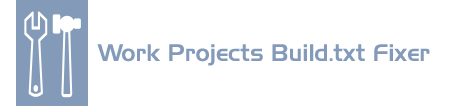
<style>
.page{position:relative;width:453px;height:106px;background:#ffffff}
.page>*{position:absolute;margin:0}
.t1{font:24px "Slicker";color:#839ab9}
</style>
<div class="page">
<p class="t1" style="left:97px;top:44px;width:333px;height:22px">Work Projects Build.txt Fixer</p>
</div>
